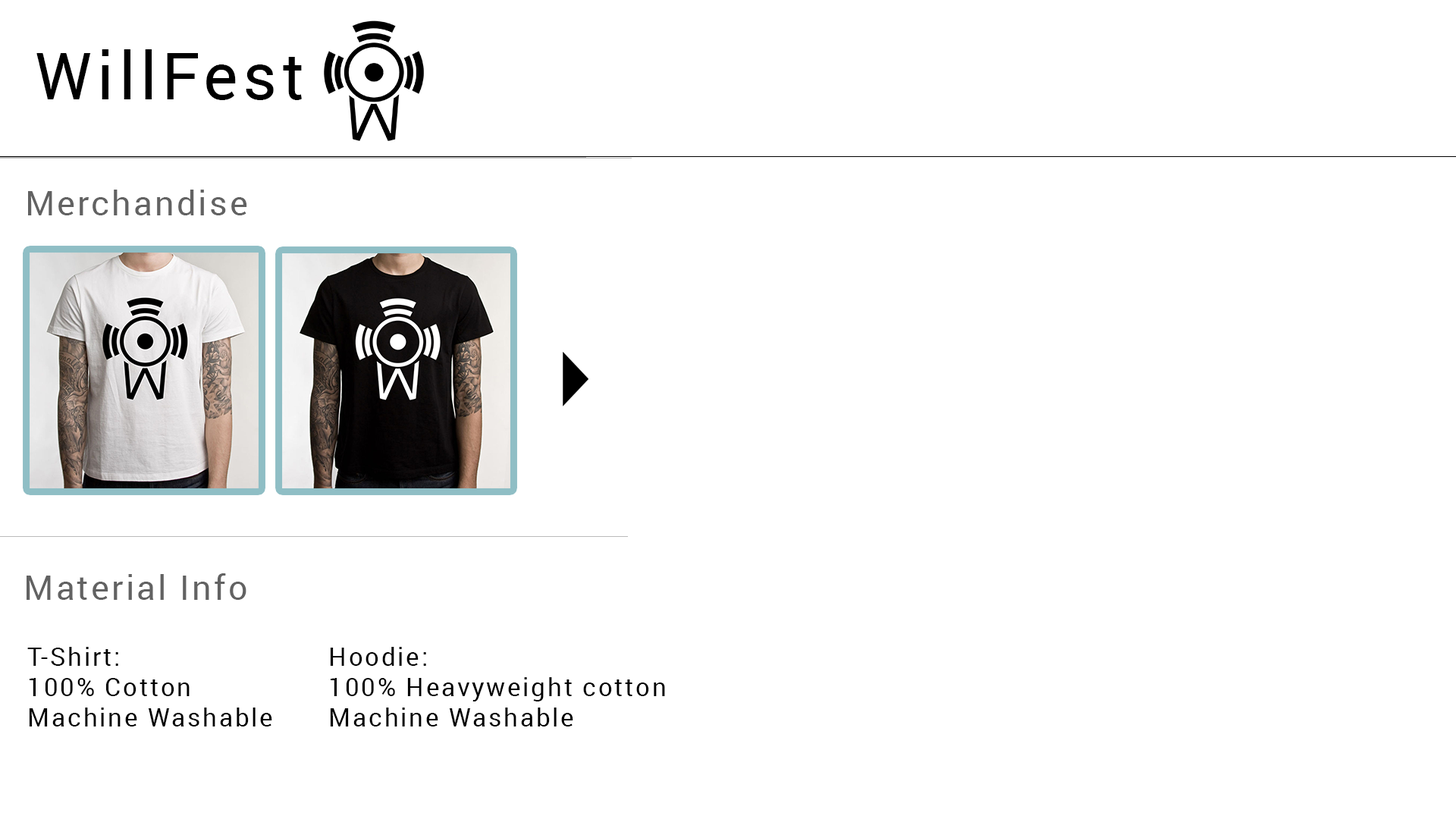
<style>
.page{position:relative;width:1456px;height:819px;background:#ffffff}
.page>*{position:absolute;margin:0}
.t1{font:65.2px "Roboto-Regular";letter-spacing:0.075em;color:#000000}
.t2{font:33.9px "Roboto-Regular";letter-spacing:0.075em;color:#626262}
.t3{font:25.4px "Roboto-Regular";letter-spacing:0.075em;color:#000000}
</style>
<div class="page">
<p class="t1" style="left:36px;top:49px;width:266px;height:51px">WillFest</p>
<p class="t2" style="left:28px;top:190px;width:219px;height:25px">Merchandise</p>
<p class="t2" style="left:27px;top:573px;width:219px;height:27px">Material Info</p>
<p class="t3" style="left:27px;top:647px;width:245px;height:79px">T-Shirt:<br>100% Cotton<br>Machine Washable</p>
<p class="t3" style="left:330px;top:647px;width:335px;height:79px">Hoodie:<br>100% Heavyweight cotton<br>Machine Washable</p>
</div>
